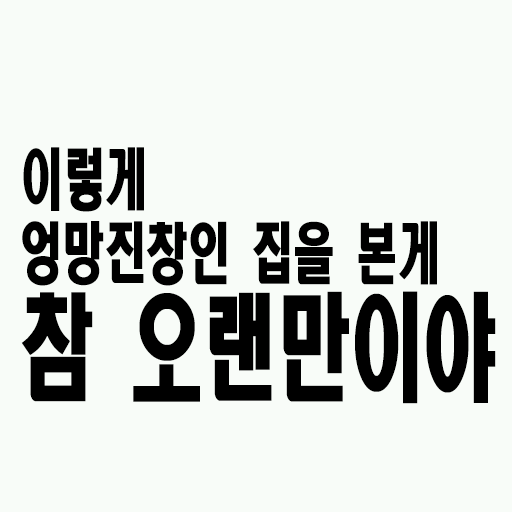
<style>
.page{position:relative;width:512px;height:512px;background:#f8fcf8}
.page>*{position:absolute;margin:0}
.t1{font:66.5px "HeadlineR-HM";color:#000000;scale:0.63 1}
.t2{font:115.9px "HeadlineR-HM";color:#000000;scale:0.63 1}
</style>
<div class="page">
<p class="t1" style="left:23px;top:147px;width:121px;height:65px">이렇게</p>
<p class="t1" style="left:22px;top:221px;width:415px;height:65px">엉망진창인 집을 본게</p>
<p class="t2" style="left:21px;top:291px;width:475px;height:113px">참 오랜만이야</p>
</div>
